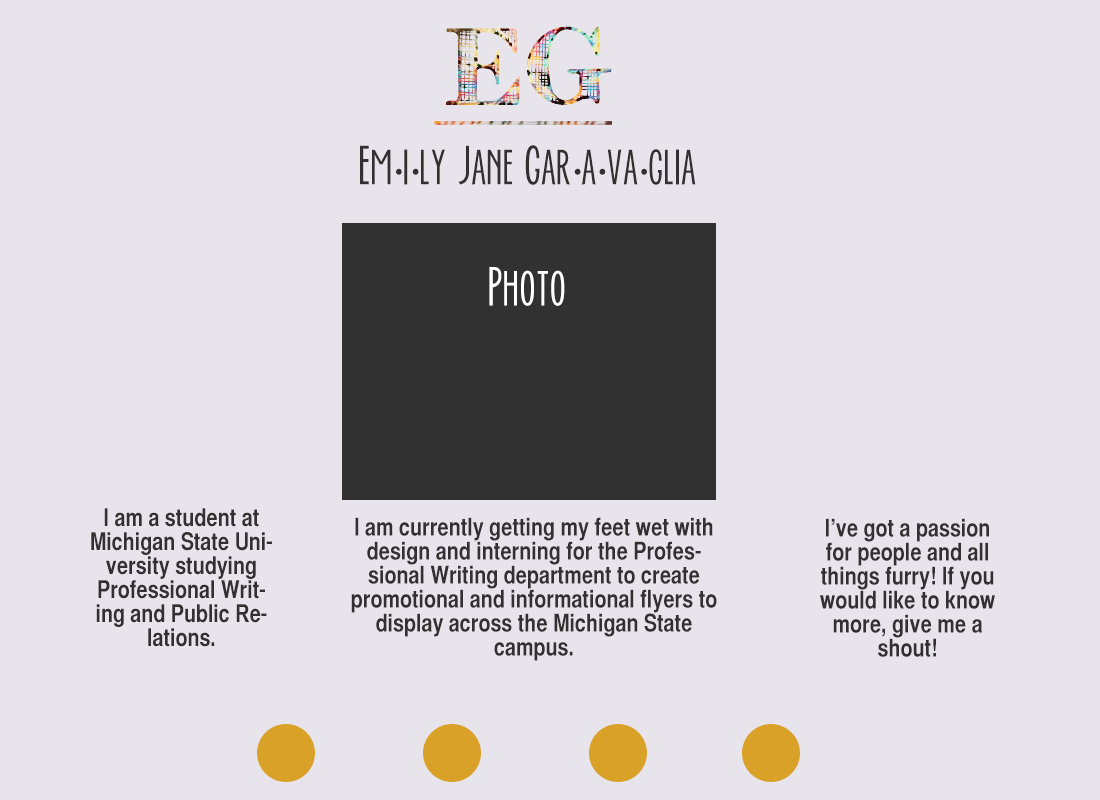
<style>
.page{position:relative;width:1100px;height:800px;background:#e8e4ec}
.page>*{position:absolute;margin:0}
.t1{font:48px "EverAfter";color:#313132}
.t2{font:48px "MyriadPro-Regular";color:#313132}
.t3{font:48px "EverAfter";color:#ffffff}
.t4{font:24px/24px "HelveticaCYBold";color:#313132}
</style>
<div class="page">
<p class="t1" style="left:360px;top:145px;width:336px;height:40px">Em<span class="t2">·</span>i<span class="t2">·</span>ly Jane Gar<span class="t2">·</span>a<span class="t2">·</span>va<span class="t2">·</span>glia</p>
<p class="t3" style="left:489px;top:267px;width:76px;height:39px">Photo</p>
<p class="t4" style="left:91px;top:508px;width:181px;height:139px;text-align:center">I am a student at Michigan State University studying Professional Writing and Public Relations.</p>
<p class="t4" style="left:351px;top:517px;width:366px;height:144px;text-align:center">I am currently getting my feet wet with design and interning for the Professional Writing department to create promotional and informational flyers to display across the Michigan State campus.</p>
<p class="t4" style="left:820px;top:518px;width:175px;height:139px;text-align:center">I’ve got a passion for people and all things furry! If you would like to know more, give me a shout!</p>
</div>
